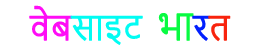
<style>
.page{position:relative;width:254px;height:54px;background:#ffffff}
.page>*{position:absolute;margin:0}
.t1{font:32.7px "NirmalaUI-Semilight";color:#01fcf3;font-weight:bold}
.t2{font:32.7px "NirmalaUI-Semilight";color:#ff0cf6;font-weight:bold}
.t3{font:36px "NirmalaUI-Semilight";color:#08fb41;font-weight:bold}
.t4{font:32.7px "NirmalaUI-Semilight";color:#011ffe;font-weight:bold}
.t5{font:32.7px "NirmalaUI-Semilight";color:#f8230d;font-weight:bold}
</style>
<div class="page">
<p class="t1" style="left:29px;top:5px;width:202px;height:40px"><span class="t2">वेब</span>साइट <span class="t3">भा</span><span class="t4">र</span><span class="t5">त</span></p>
</div>
